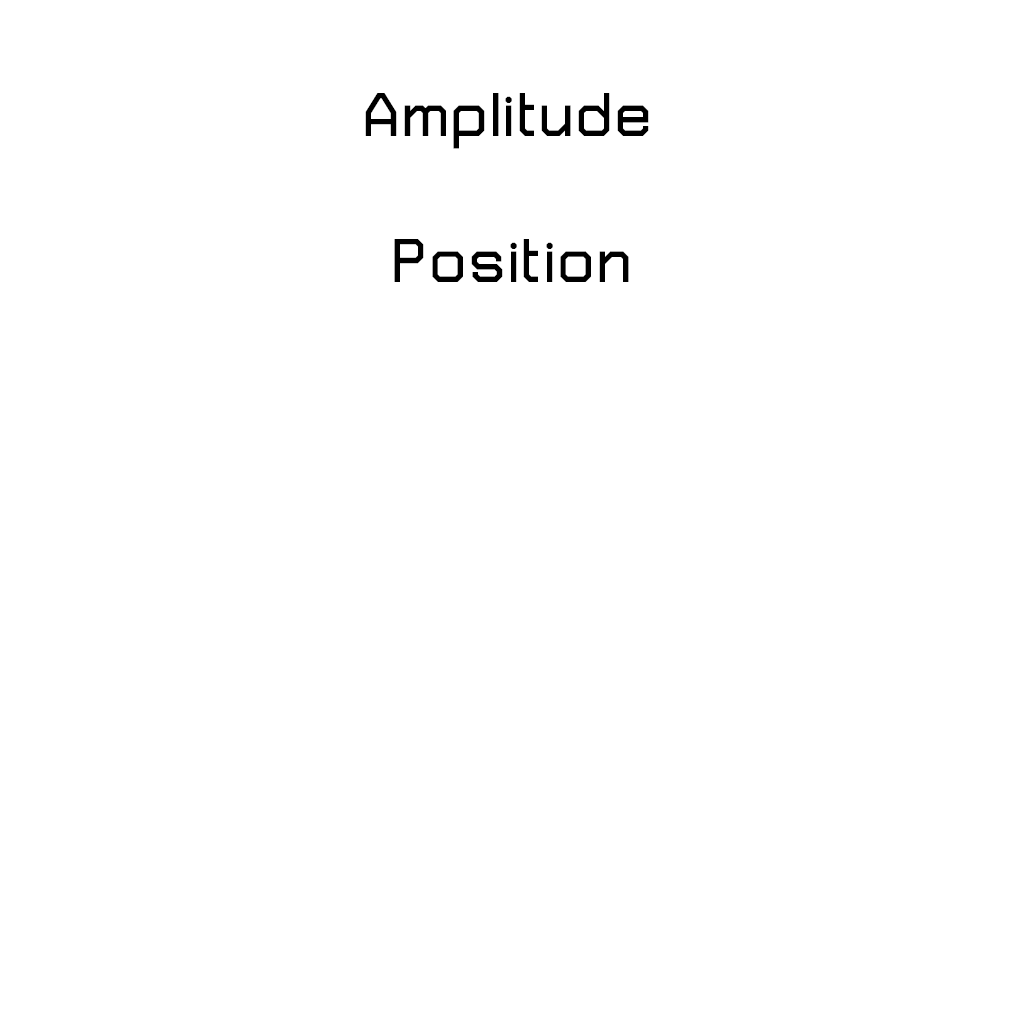
<style>
.page{position:relative;width:1024px;height:1024px;background:#ffffff}
.page>*{position:absolute;margin:0}
.t1{font:100px "THChakraPetch-Bold";color:#000000}
</style>
<div class="page">
<p class="t1" style="left:365px;top:93px;width:284px;height:56px">Amplitude</p>
<p class="t1" style="left:394px;top:239px;width:235px;height:43px">Position</p>
</div>
